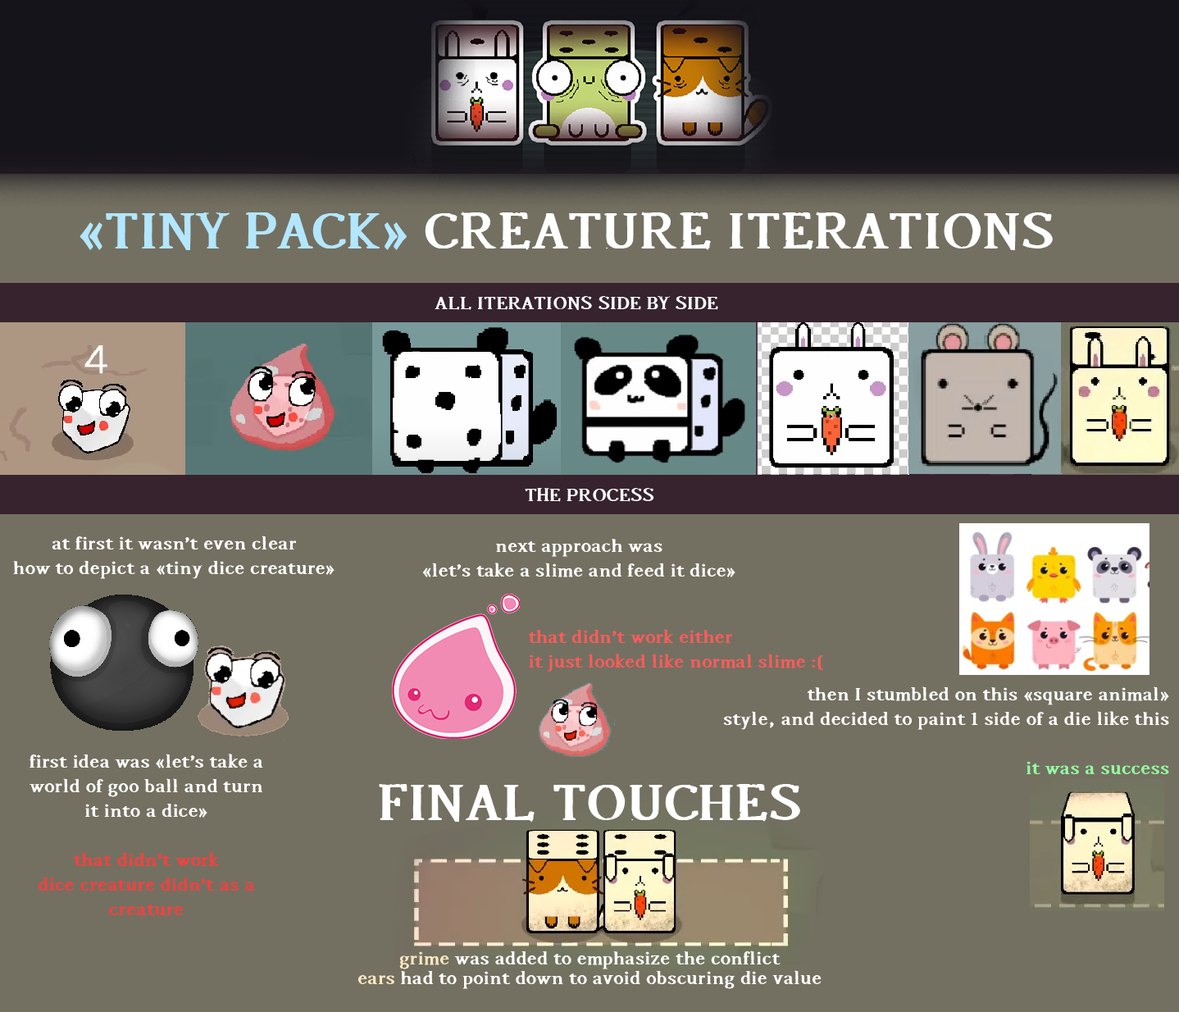
<style>
.page{position:relative;width:1179px;height:1012px;background:#737061}
.page>*{position:absolute;margin:0}
.t1{font:58.2px "Beholden-Bold";color:#ffffff}
.t2{font:58.2px "Beholden-Bold";color:#b3e7ff}
.t3{font:20.5px "Beholden-Bold";color:#ffffff}
.t4{font:20.5px "Beholden-Bold";color:#ff5b5b}
.t5{font:20.5px "Beholden-Bold";color:#94ffa2}
.t6{font:20.5px "Beholden-Bold";color:#ff3d3d}
.t7{font:20.5px "Beholden-Bold";color:#fee8c2}
</style>
<div class="page">
<p class="t1" style="left:80px;top:211px;width:973px;height:39px"><span class="t2">«TINY PACK»</span> CREATURE ITERATIONS</p>
<p class="t3" style="left:434px;top:296px;width:284px;height:14px">ALL ITERATIONS SIDE BY SIDE</p>
<p class="t3" style="left:525px;top:488px;width:129px;height:14px">THE PROCESS</p>
<p class="t3" style="left:13px;top:535px;width:321px;height:44px;text-align:center">at first it wasn’t even clear<br>how to depict a «tiny dice creature»</p>
<p class="t3" style="left:422px;top:539px;width:313px;height:38px;text-align:center">next approach was<br>«let’s take a slime and feed it dice»</p>
<p class="t4" style="left:528px;top:629px;width:296px;height:42px">that didn’t work either<br>it just looked like normal slime :(</p>
<p class="t3" style="left:723px;top:686px;width:446px;height:88px;text-align:right">then I stumbled on this «square animal»<br>style, and decided to paint 1 side of a die like this<br><br><span class="t5">it was a success</span></p>
<p class="t3" style="left:30px;top:753px;width:233px;height:162px;text-align:center">first idea was «let’s take a world of goo ball and turn it into a dice»<br><br><span class="t6">that didn’t work<br>dice creature didn’t as a creature</span></p>
<p class="t1" style="left:379px;top:784px;width:421px;height:38px">FINAL TOUCHES</p>
<p class="t3" style="left:399px;top:950px;width:381px;height:19px"><span class="t7">grime </span>was added to emphasize the conflict</p>
<p class="t3" style="left:358px;top:970px;width:463px;height:19px"><span class="t7">ears </span>had to point down to avoid obscuring die value</p>
</div>
